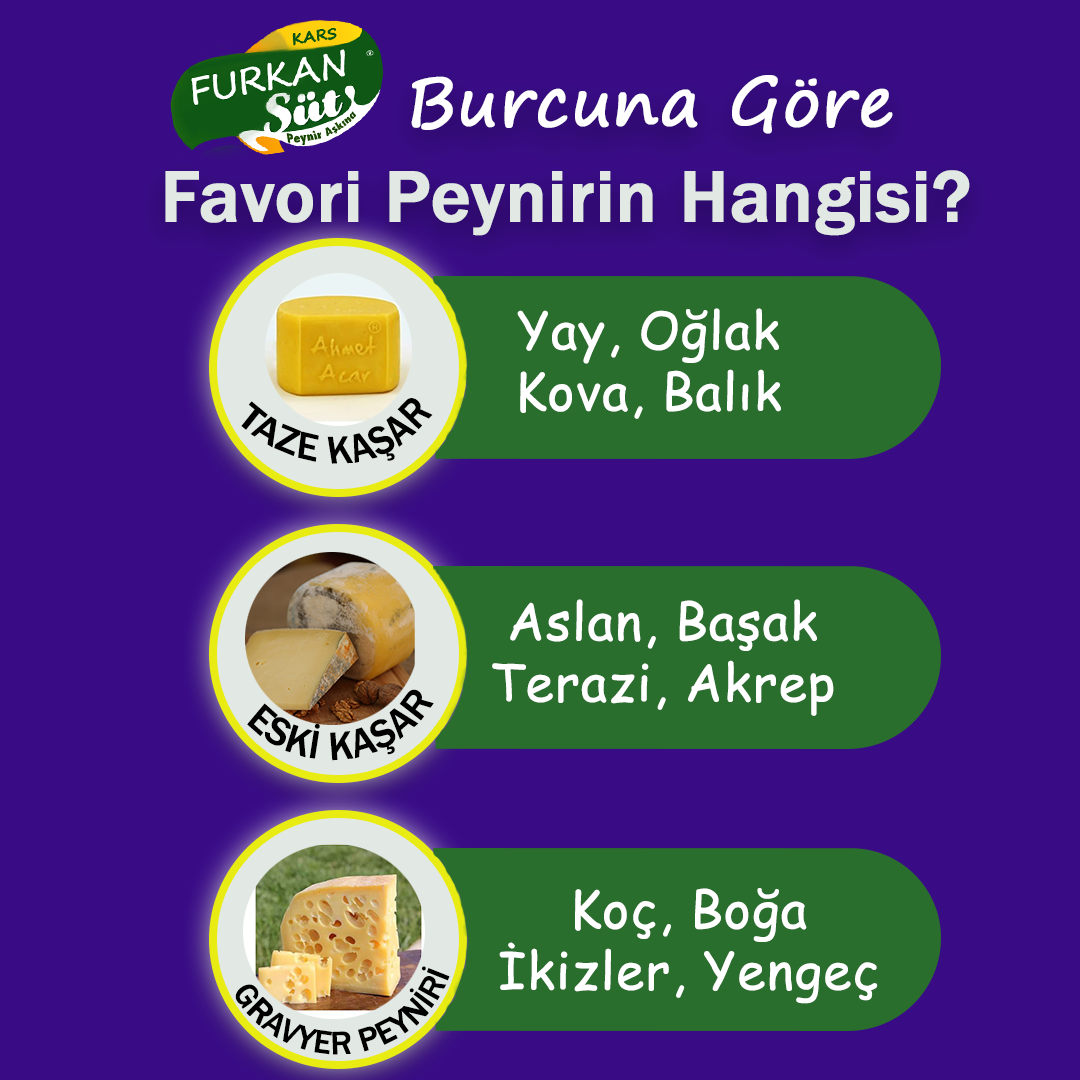
<style>
.page{position:relative;width:1080px;height:1080px;background:#390c86}
.page>*{position:absolute;margin:0}
.t1{font:66.7px "SegoePrint";color:#ffffff;font-weight:bold}
.t2{font:75px "FranklinGothic-Medium";color:#e2e8e3;font-weight:bold}
.t3{font:51.1px "ComicSansMS";color:#ffffff;font-weight:bold}
.t4{font:40.8px "FranklinGothic-Medium";color:#000000;font-weight:bold}
</style>
<div class="page">
<p class="t1" style="left:411px;top:75px;width:482px;height:59px">Burcuna Göre</p>
<p class="t2" style="left:165px;top:170px;width:805px;height:66px">Favori Peynirin Hangisi?</p>
<p class="t3" style="left:517px;top:308px;width:264px;height:111px;text-align:center">Yay, Oğlak<br>Kova, Balık</p>
<p class="t3" style="left:492px;top:599px;width:342px;height:117px;text-align:center">Aslan, Başak<br>Terazi, Akrep</p>
<p class="t4" style="left:247px;top:689px;width:187px;height:72px;text-align:center">ESKİ KAŞAR</p>
<p class="t3" style="left:499px;top:888px;width:379px;height:116px;text-align:center">Koç, Boğa<br>İkizler, Yengeç</p>
</div>
